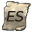
<style>
.page{position:relative;width:32px;height:32px;background:#ffffff}
.page>*{position:absolute;margin:0}
.t1{font:13.3px "Paperlogy-5Medium";color:#242424;font-style:italic}
</style>
<div class="page">
<p class="t1" style="left:6px;top:10px;width:18px;height:12px">ES</p>
</div>
